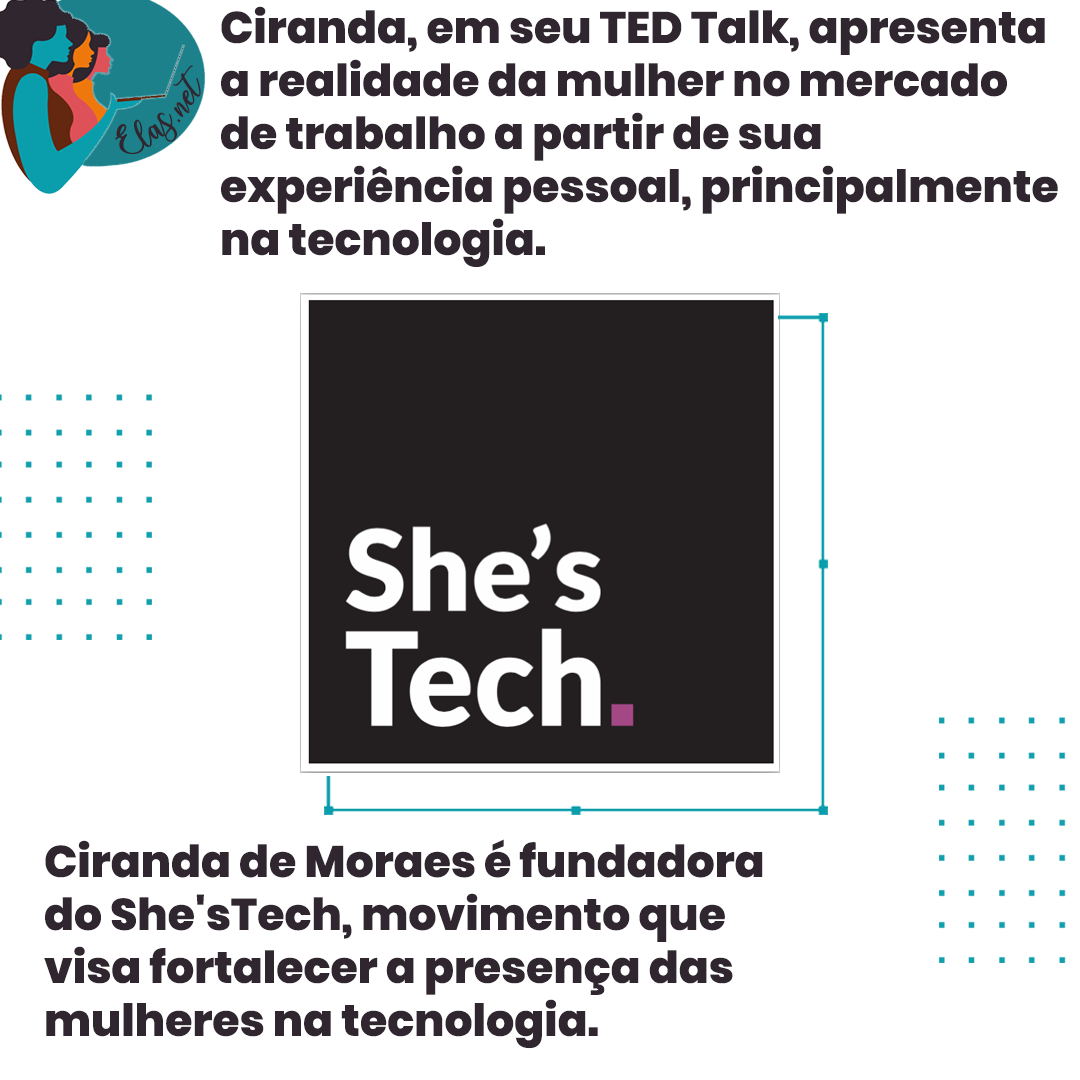
<style>
.page{position:relative;width:1080px;height:1080px;background:#ffffff}
.page>*{position:absolute;margin:0}
.t1{font:44.1px "Poppins-ExtraBold";color:#2f262f}
.t2{font:25px "charlinda-Regular";color:#2f262f;scale:1.18 1}
</style>
<div class="page">
<p class="t1" style="left:221px;top:6px;width:837px;height:261px">Ciranda, em seu TED Talk, apresenta <br>a realidade da mulher no mercado <br>de trabalho a partir de sua <br>experiência pessoal, principalmente <br>na tecnologia.</p>
<p class="t2" style="left:115px;top:65px;width:86px;height:89px;rotate:-43deg">Elas.net</p>
<p class="t1" style="left:44px;top:839px;width:719px;height:210px">Ciranda de Moraes é fundadora <br>do She'sTech, movimento que <br>visa fortalecer a presença das <br>mulheres na tecnologia.</p>
</div>
